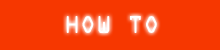
<style>
.page{position:relative;width:220px;height:50px;background:#f63700}
.page>*{position:absolute;margin:0}
.t1{font:22px "OCRAStd";color:#ffffff}
</style>
<div class="page">
<p class="t1" style="left:66px;top:16px;width:91px;height:17px">HOW TO</p>
</div>
